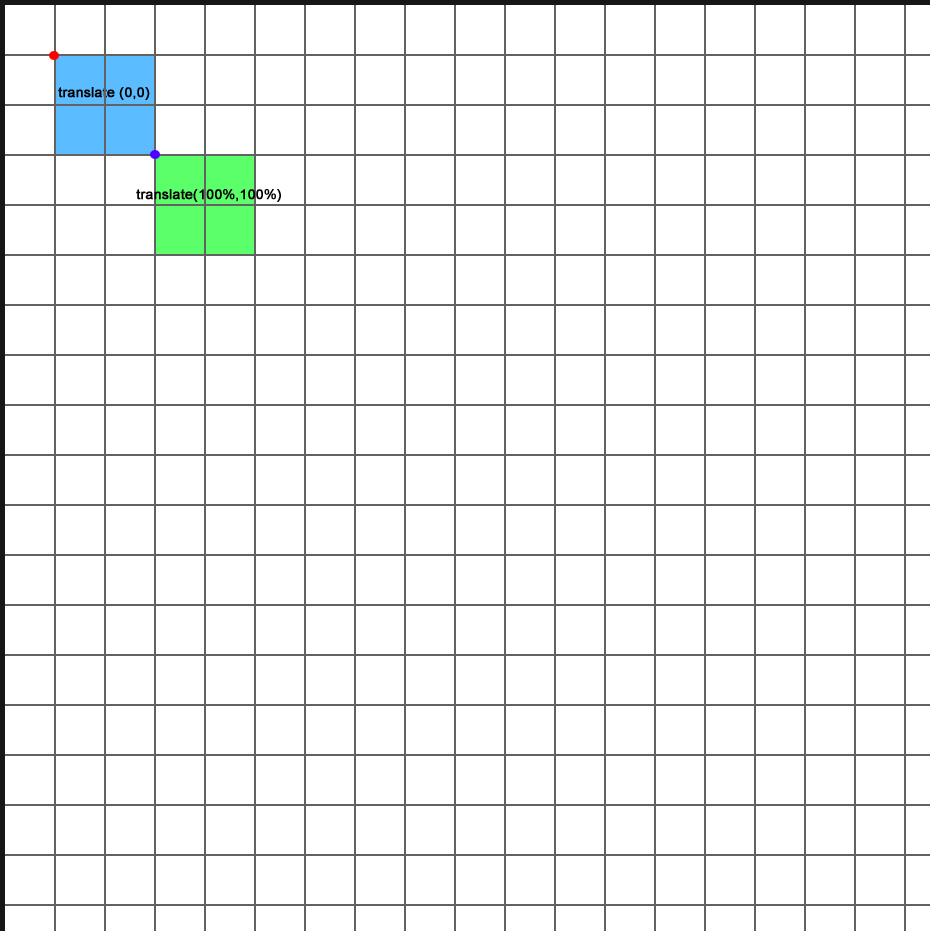
<style>
.page{position:relative;width:930px;height:931px;background:#ffffff}
.page>*{position:absolute;margin:0}
.t1{font:13.9px "ArialMT";color:#000000;font-weight:bold}
</style>
<div class="page">
<p class="t1" style="left:58px;top:87px;width:92px;height:13px">translate (0,0)</p>
<p class="t1" style="left:136px;top:189px;width:145px;height:13px">translate(100%,100%)</p>
</div>
